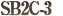
<style>
.page{position:relative;width:63px;height:16px;background:#ffffff}
.page>*{position:absolute;margin:0}
.t1{font:18px "RyuminPro-ExBold";letter-spacing:-0.06em;color:#4a3f32;font-weight:bold;scale:0.9 1}
</style>
<div class="page">
<p class="t1" style="left:0px;top:1px;width:52px;height:15px">SB2C-3</p>
</div>
